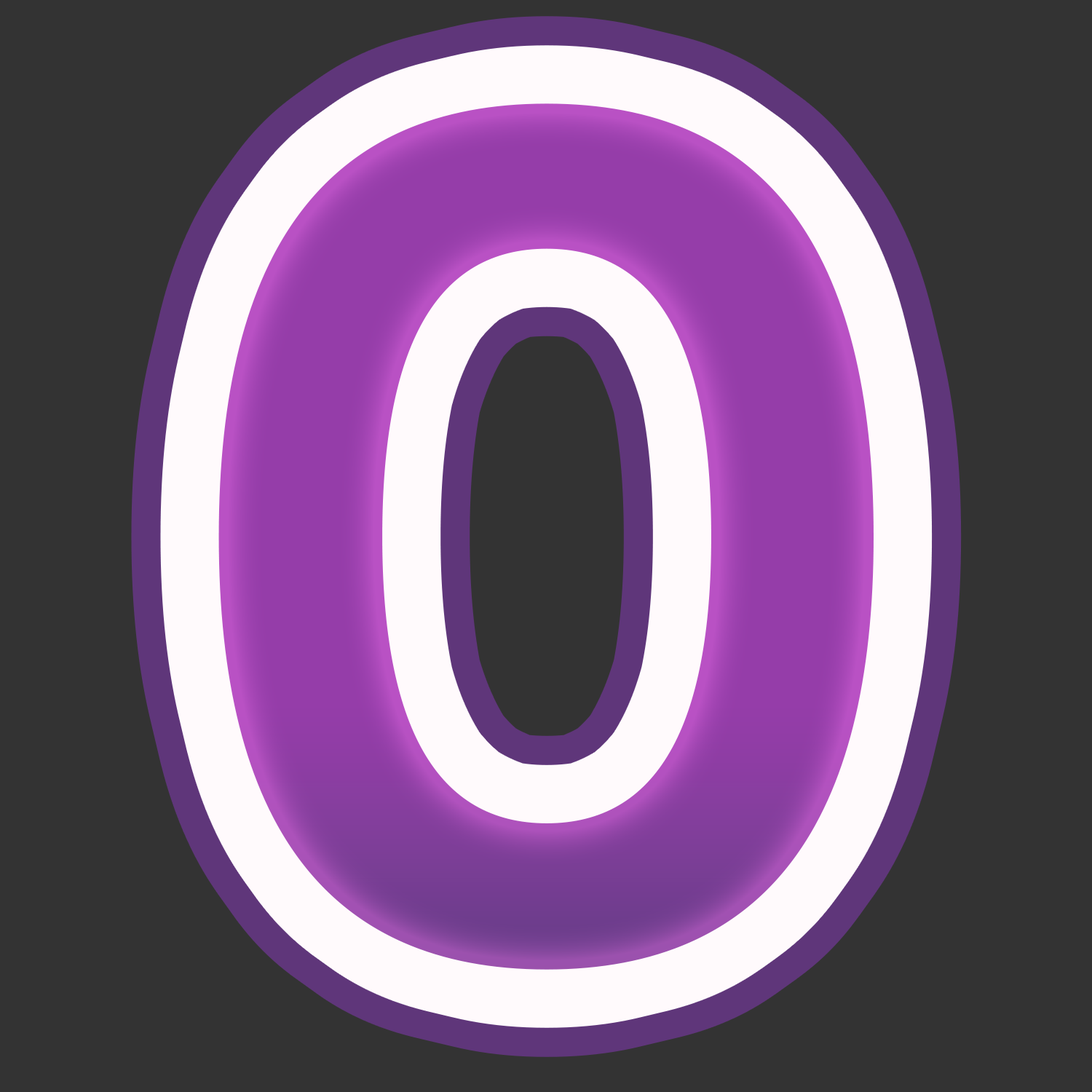
<style>
.page{position:relative;width:1092px;height:1092px;background:#333333}
.page>*{position:absolute;margin:0}
.t1{font:1082.2px "NitalagoRuika-06";color:#953ea9}
</style>
<div class="page">
<p class="t1" style="left:218px;top:103px;width:656px;height:867px">0</p>
</div>
